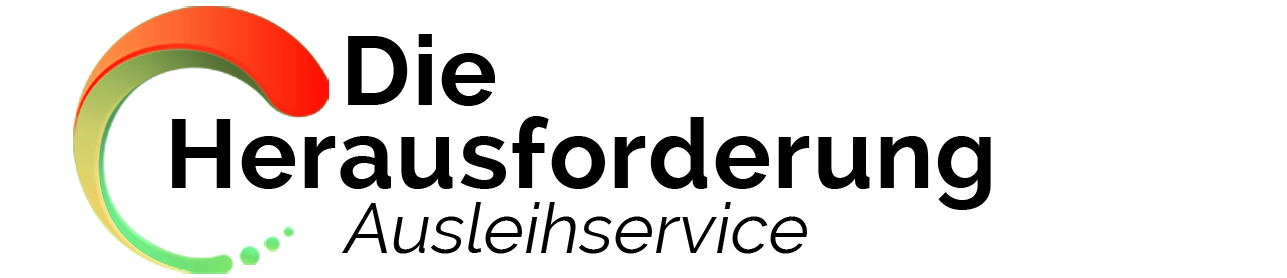
<style>
.page{position:relative;width:1287px;height:278px;background:#ffffff}
.page>*{position:absolute;margin:0}
.t1{font:97.1px/83.5px "Raleway-Bold";letter-spacing:0.02em;color:#000000}
.t2{font:69.4px "Raleway";color:#000000;font-style:italic}
</style>
<div class="page">
<p class="t1" style="left:172px;top:34px;width:819px;height:176px">Die<br>Herausforderung</p>
<p class="t2" style="left:342px;top:202px;width:465px;height:52px">Ausleihservice</p>
</div>
